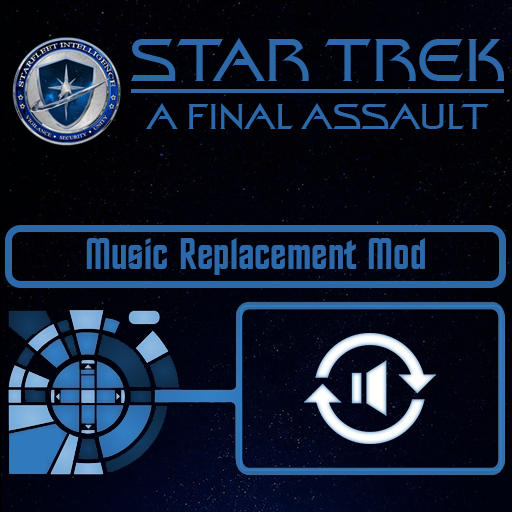
<style>
.page{position:relative;width:512px;height:512px}
.page>*{position:absolute;margin:0}
.t1{font:60px "StarTrekFilmBT-Regular";color:#2d68a9}
.t2{font:36px "StarTrekFilmBT-Regular";color:#2d68a9}
.t3{font:44px "StarTrekBT-Regular";color:#2d68a9}
</style>
<div class="page">
<p class="t1" style="left:131px;top:38px;width:373px;height:43px">STAR TREK</p>
<p class="t2" style="left:146px;top:103px;width:343px;height:27px">A FINAL ASSAULT</p>
<p class="t3" style="left:86px;top:238px;width:339px;height:37px">Music Replacement Mod</p>
</div>
